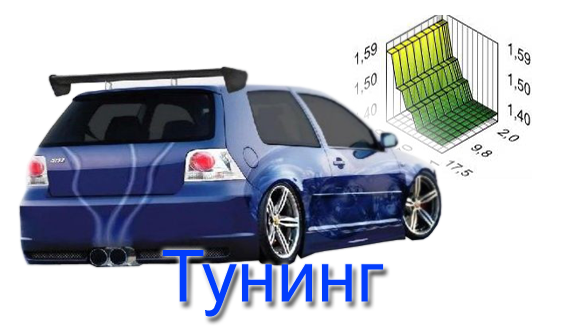
<style>
.page{position:relative;width:575px;height:333px;background:#ffffff}
.page>*{position:absolute;margin:0}
.t1{font:72px "ArialMT";color:#023dfc}
</style>
<div class="page">
<p class="t1" style="left:162px;top:250px;width:221px;height:67px">Тунинг</p>
</div>
